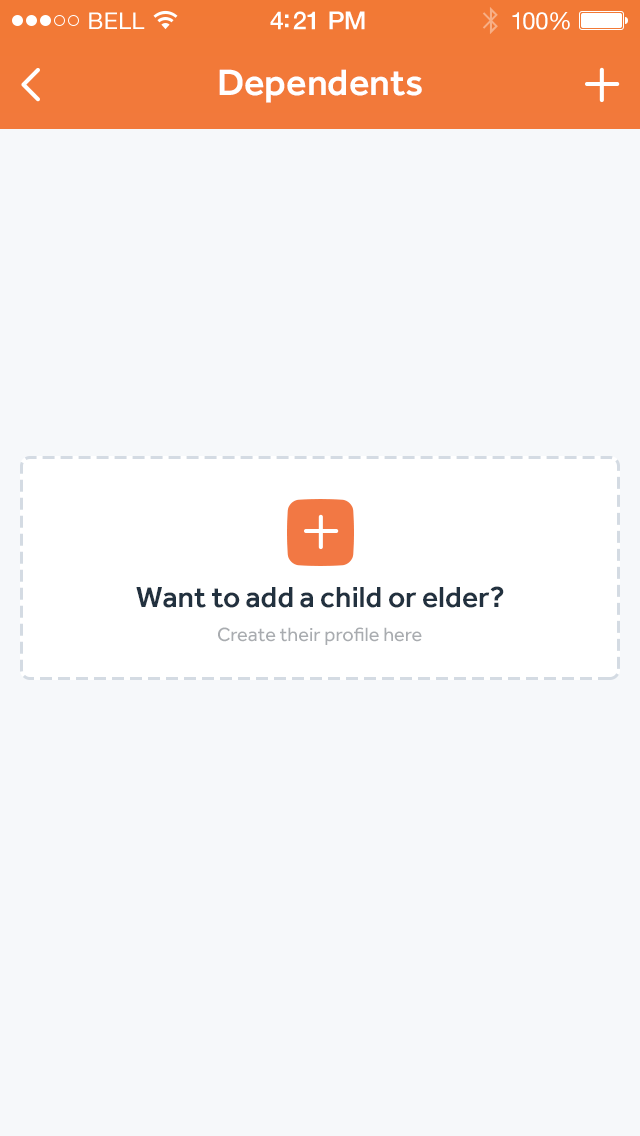
<style>
.page{position:relative;width:640px;height:1136px;background:#f6f8fa}
.page>*{position:absolute;margin:0}
.t1{font:23px "HelveticaNeue";letter-spacing:0.02em;color:#ffffff}
.t2{font:25px "HelveticaNeue-Medium";letter-spacing:-0.02em;color:#ffffff}
.t3{font:24px "HelveticaNeue";letter-spacing:-0.02em;color:#ffffff}
.t4{font:38px "Effra-Medium";color:#ffffff}
.t5{font:30px "Effra-Medium";color:#22313f}
.t6{font:20px "Effra-Regular";color:#a9acb0}
</style>
<div class="page">
<p class="t1" style="left:89px;top:12px;width:56px;height:17px">BELL</p>
<p class="t2" style="left:270px;top:11px;width:95px;height:19px">4:21 PM</p>
<p class="t3" style="left:512px;top:12px;width:58px;height:18px">100%</p>
<p class="t4" style="left:219px;top:69px;width:203px;height:34px">Dependents</p>
<p class="t5" style="left:136px;top:586px;width:368px;height:22px">Want to add a child or elder?</p>
<p class="t6" style="left:218px;top:627px;width:204px;height:18px">Create their profile here</p>
</div>
